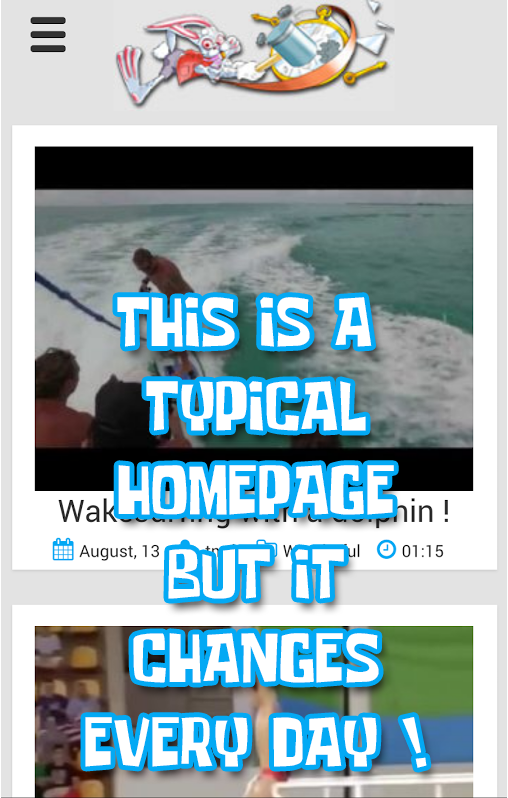
<style>
.page{position:relative;width:508px;height:798px;background:#ffffff}
.page>*{position:absolute;margin:0}
.t1{font:70px "SomeTimeLater";color:#ffffff}
</style>
<div class="page">
<p class="t1" style="left:85px;top:297px;width:342px;height:471px;text-align:center">THIS IS A <br>TYPICAL<br>HOMEPAGE<br>BUT IT<br>CHANGES<br>EVERY DAY !</p>
</div>
